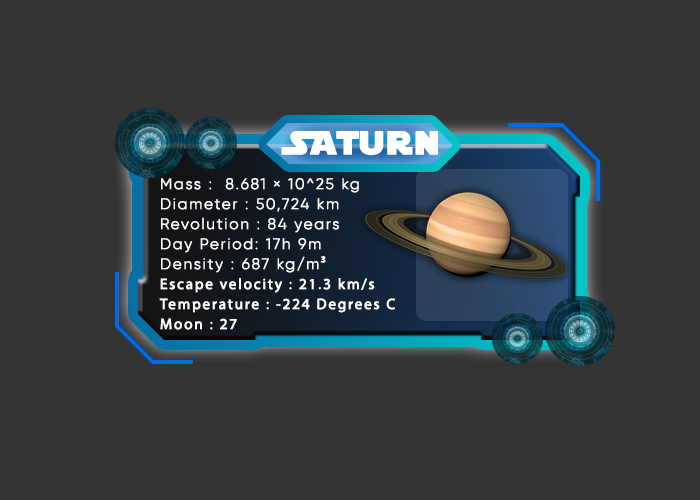
<style>
.page{position:relative;width:700px;height:500px;background:#333333}
.page>*{position:absolute;margin:0}
.t1{font:32px "StarJedi";letter-spacing:0.1em;color:#ffffff;font-weight:bold}
.t2{font:15px/20px "Gilroy-Light";letter-spacing:0.1em;color:#ffffff;font-weight:bold}
.t3{font:15px/20px "MyriadPro-Regular";letter-spacing:0.1em;color:#ffffff;font-weight:bold}
</style>
<div class="page">
<p class="t1" style="left:281px;top:131px;width:157px;height:25px">SATurn</p>
<p class="t2" style="left:159px;top:178px;width:236px;height:152px">Mass :  8.681 × 10^25 kg<br>Diameter : 50,724 km<br>Revolution : 84 years<br>Day Period: 17h 9m<br>Density : 687 kg/m<span class="t3">³<br>Escape velocity : 21.3 km/s<br>Temperature : -224 Degrees C<br>Moon : 27</span></p>
</div>
